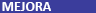
<style>
.page{position:relative;width:96px;height:13px;background:#3b3d9c}
.page>*{position:absolute;margin:0}
.t1{font:14px "Calibri-Bold";color:#ffffff}
</style>
<div class="page">
<p class="t1" style="left:2px;top:2px;width:49px;height:9px">MEJORA</p>
</div>
